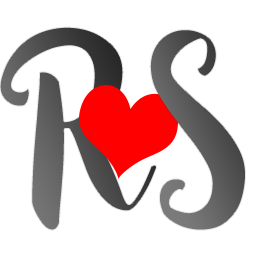
<style>
.page{position:relative;width:256px;height:256px;background:#ffffff}
.page>*{position:absolute;margin:0}
.t1{font:260px "Sophia";letter-spacing:-0.01em;color:#ffffff}
</style>
<div class="page">
<p class="t1" style="left:0px;top:26px;width:157px;height:205px">R</p>
<p class="t1" style="left:149px;top:29px;width:97px;height:202px">S</p>
</div>
